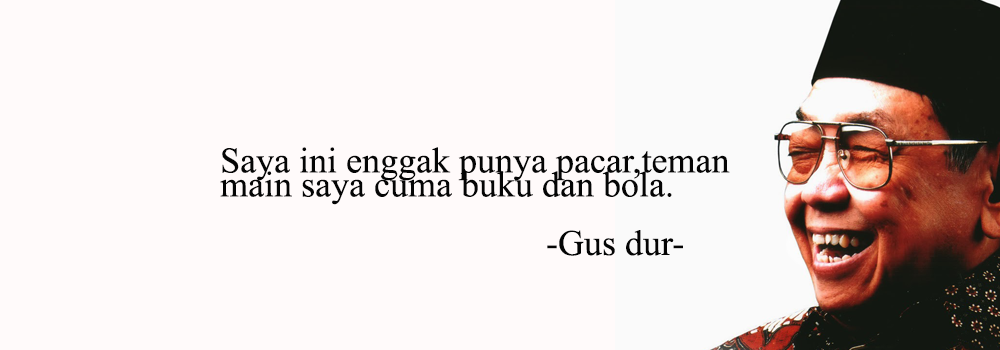
<style>
.page{position:relative;width:1000px;height:350px;background:#fffafa}
.page>*{position:absolute;margin:0}
.t1{font:36px/24px "TimesNewRomanPSMT";color:#050505}
.t2{font:36px "TimesNewRomanPSMT";color:#040404}
</style>
<div class="page">
<p class="t1" style="left:220px;top:147px;width:510px;height:58px;text-align:right">Saya ini enggak punya pacar,teman<br>main saya cuma buku dan bola.</p>
<p class="t2" style="left:547px;top:230px;width:136px;height:26px">-Gus dur-</p>
</div>
